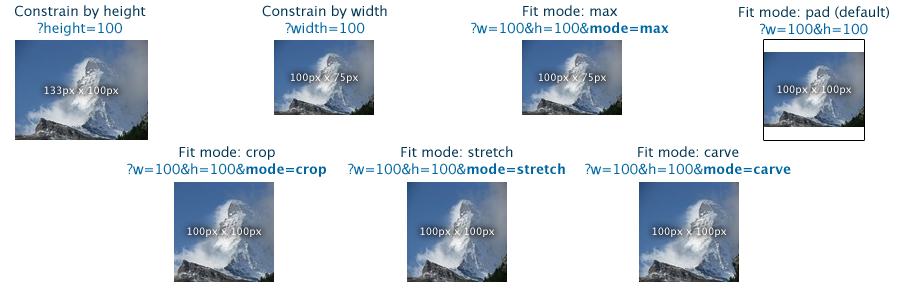
<style>
.page{position:relative;width:906px;height:290px;background:#ffffff}
.page>*{position:absolute;margin:0}
.t1{font:13.8px "LucidaGrande";color:#003553}
.t2{font:13.8px "LucidaGrande";color:#0066a1}
.t3{font:13.8px "LucidaGrande";color:#013553}
.t4{font:13.8px "LucidaGrande-Bold";color:#0066a1}
.t5{font:10px "LucidaGrande";color:#ffffff}
</style>
<div class="page">
<p class="t1" style="left:15px;top:5px;width:131px;height:31px;text-align:center">Constrain by height<br><span class="t2">?height=100</span></p>
<p class="t3" style="left:262px;top:5px;width:125px;height:29px;text-align:center">Constrain by width<br><span class="t2">?width=100</span></p>
<p class="t3" style="left:471px;top:5px;width:198px;height:29px;text-align:center">Fit mode: max<br><span class="t2">?w=100&amp;h=100&amp;</span><span class="t4">mode=max</span></p>
<p class="t3" style="left:739px;top:6px;width:150px;height:29px;text-align:center">Fit mode: pad (default)<br><span class="t2">?w=100&amp;h=100</span></p>
<p class="t5" style="left:291px;top:73px;width:67px;height:10px">100px x 75px</p>
<p class="t5" style="left:539px;top:73px;width:67px;height:10px">100px x 75px</p>
<p class="t5" style="left:44px;top:86px;width:75px;height:10px">133px x 100px</p>
<p class="t5" style="left:777px;top:85px;width:75px;height:10px">100px x 100px</p>
<p class="t3" style="left:127px;top:146px;width:199px;height:31px;text-align:center">Fit mode: crop<br><span class="t2">?w=100&amp;h=100&amp;</span><span class="t4">mode=crop</span></p>
<p class="t3" style="left:348px;top:146px;width:217px;height:29px;text-align:center">Fit mode: stretch<br><span class="t2">?w=100&amp;h=100&amp;</span><span class="t4">mode=stretch</span></p>
<p class="t3" style="left:585px;top:146px;width:206px;height:29px;text-align:center">Fit mode: carve<br><span class="t2">?w=100&amp;h=100&amp;</span><span class="t4">mode=carve</span></p>
<p class="t5" style="left:187px;top:227px;width:75px;height:10px">100px x 100px</p>
<p class="t5" style="left:420px;top:227px;width:75px;height:10px">100px x 100px</p>
<p class="t5" style="left:652px;top:227px;width:75px;height:10px">100px x 100px</p>
</div>
